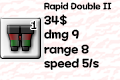
<style>
.page{position:relative;width:120px;height:80px;background:#ffffff}
.page>*{position:absolute;margin:0}
.t1{font:12px "MaplestoryBold";color:#000000}
.t2{font:9px "MaplestoryBold";color:#000000}
</style>
<div class="page">
<p class="t1" style="left:44px;top:2px;width:68px;height:68px"><span class="t2">Rapid Double II<br></span>34$<br>dmg 9<br>range 8<br>speed 5/s</p>
</div>
